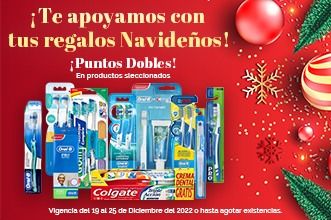
<style>
.page{position:relative;width:331px;height:220px}
.page>*{position:absolute;margin:0}
.t1{font:20.7px "AbrilFatface-Regular";letter-spacing:0.02em;color:#fcef93}
.t2{font:14.1px "AbrilFatface-Regular";letter-spacing:0.02em;color:#ffffff}
.t3{font:7.1px "Raleway-SemiBold";letter-spacing:0.02em;color:#ffffff}
.t4{font:6.7px "Raleway-SemiBold";letter-spacing:0.02em;color:#ffffff}
</style>
<div class="page">
<p class="t1" style="left:8px;top:8px;width:220px;height:44px;text-align:center">¡Te apoyamos con <br>tus regalos Navideños!</p>
<p class="t2" style="left:70px;top:57px;width:106px;height:15px">¡Puntos Dobles!</p>
<p class="t3" style="left:76px;top:73px;width:95px;height:7px">En productos sleccionados</p>
<p class="t4" style="left:48px;top:208px;width:234px;height:7px">Vigencia del 19 al 25 de Diciembre del 2022 o hasta agotar existencias.</p>
</div>
